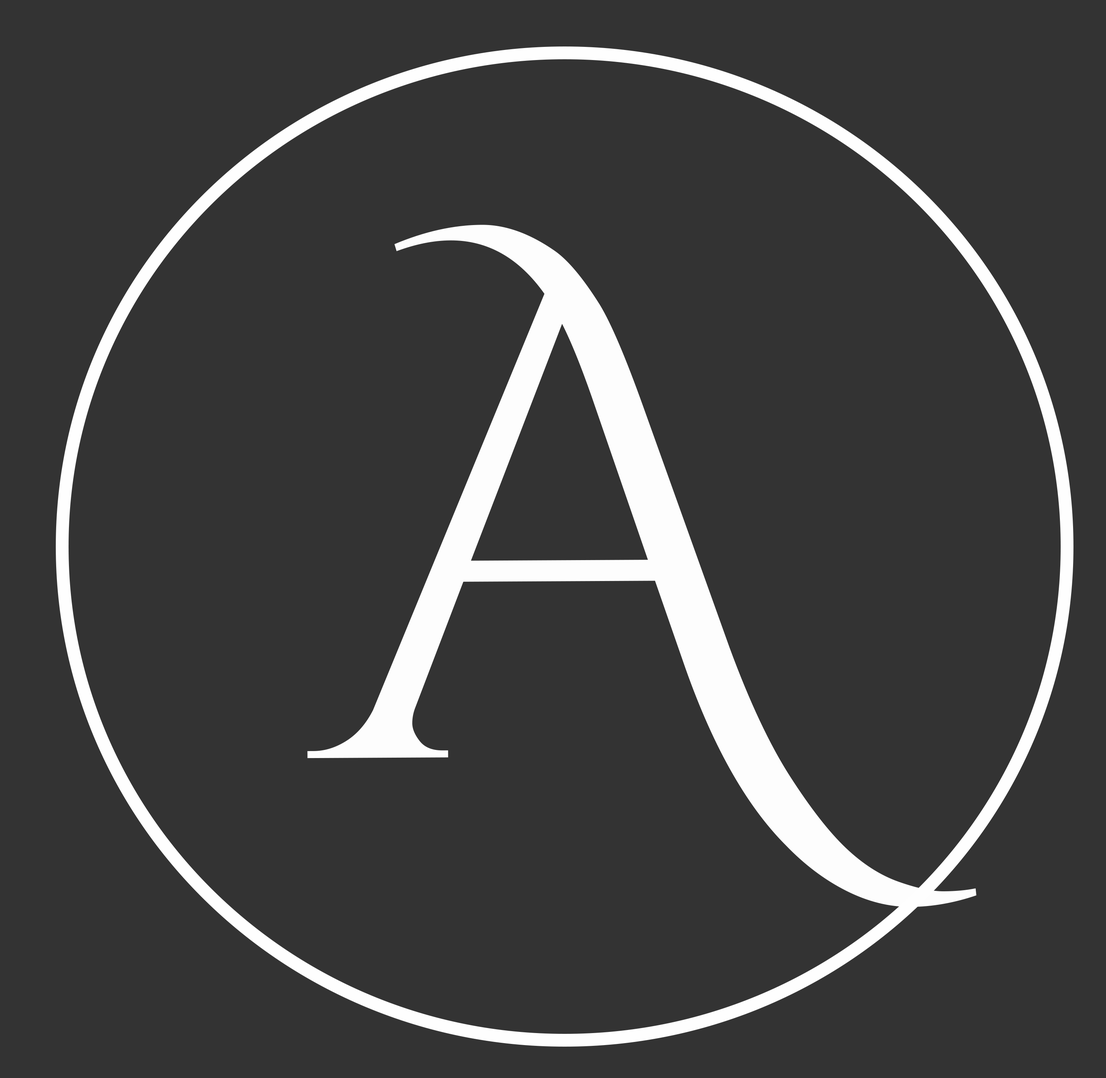
<style>
.page{position:relative;width:1106px;height:1078px;background:#333333}
.page>*{position:absolute;margin:0}
.t1{font:699.7px "CinzelDecorative-Regular";color:#fdfdfd}
</style>
<div class="page">
<p class="t1" style="left:307px;top:225px;width:670px;height:682px">A</p>
</div>
